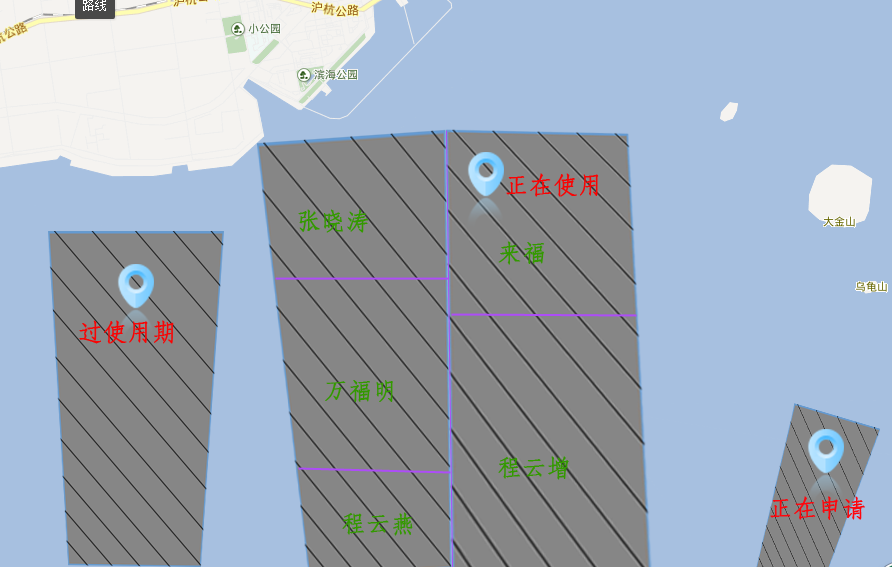
<style>
.page{position:relative;width:892px;height:567px;background:#a7c0e0}
.page>*{position:absolute;margin:0}
.t1{font:24px "STFangsong";color:#f90404;font-weight:bold}
.t2{font:24px "STFangsong";color:#339900;font-weight:bold}
.t3{font:24px "STFangsong";color:#ff060c;font-weight:bold}
</style>
<div class="page">
<p class="t1" style="left:506px;top:173px;width:93px;height:24px">正在使用</p>
<p class="t2" style="left:298px;top:209px;width:70px;height:24px">张晓涛</p>
<p class="t2" style="left:498px;top:241px;width:46px;height:24px">来福</p>
<p class="t1" style="left:79px;top:320px;width:95px;height:24px">过使用期</p>
<p class="t2" style="left:325px;top:380px;width:68px;height:22px">万福明</p>
<p class="t2" style="left:498px;top:456px;width:71px;height:24px">程云增</p>
<p class="t3" style="left:770px;top:496px;width:95px;height:24px">正在申请</p>
<p class="t2" style="left:342px;top:512px;width:71px;height:24px">程云燕</p>
</div>
